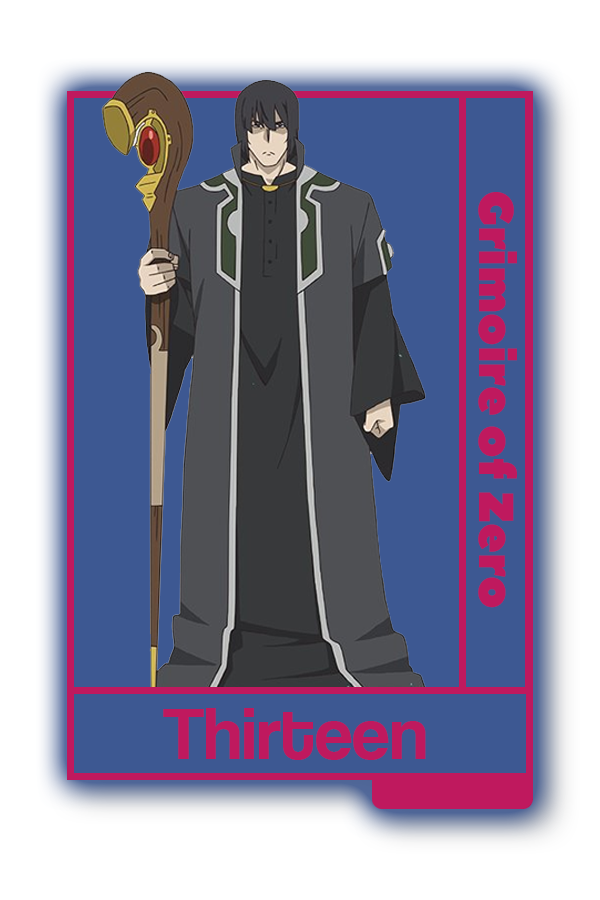
<style>
.page{position:relative;width:600px;height:900px;background:#3d5892}
.page>*{position:absolute;margin:0}
.t1{font:48.8px "PeaceSans";color:#bf195e}
.t2{font:75px "CoolveticaRg-Regular";color:#bf195e}
</style>
<div class="page">
<p class="t1" style="left:478px;top:192px;width:39px;height:416px;rotate:90deg">Grimoire of Zero</p>
<p class="t2" style="left:163px;top:708px;width:263px;height:52px">Thirteen</p>
</div>
